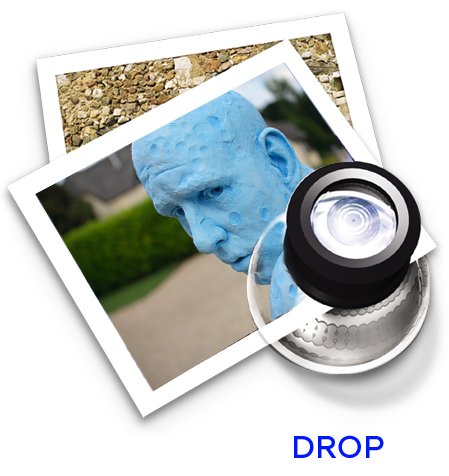
<style>
.page{position:relative;width:449px;height:476px;background:#ffffff}
.page>*{position:absolute;margin:0}
.t1{font:32px "Lack-Regular";color:#0018ff}
</style>
<div class="page">
<p class="t1" style="left:294px;top:435px;width:90px;height:23px">DROP</p>
</div>
